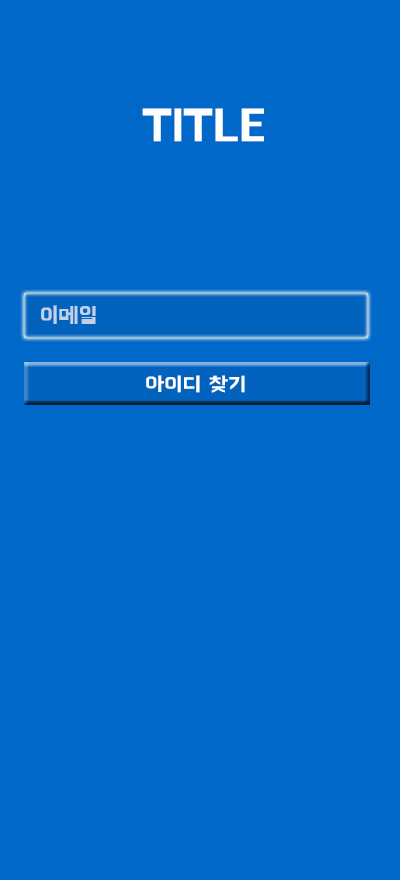
<style>
.page{position:relative;width:400px;height:880px;background:#0068c8}
.page>*{position:absolute;margin:0}
.t1{font:45px "BMHANNAPro";color:#ffffff}
.t2{font:22.1px "BMHANNA11yrsold";color:#c2d1ea;scale:1.04 1}
.t3{font:19.8px "BMHANNAPro";color:#ffffff;scale:1.16 1}
</style>
<div class="page">
<p class="t1" style="left:142px;top:108px;width:122px;height:34px">TITLE</p>
<p class="t2" style="left:41px;top:305px;width:55px;height:19px">이메일</p>
<p class="t3" style="left:146px;top:375px;width:99px;height:18px">아이디 찾기</p>
</div>
